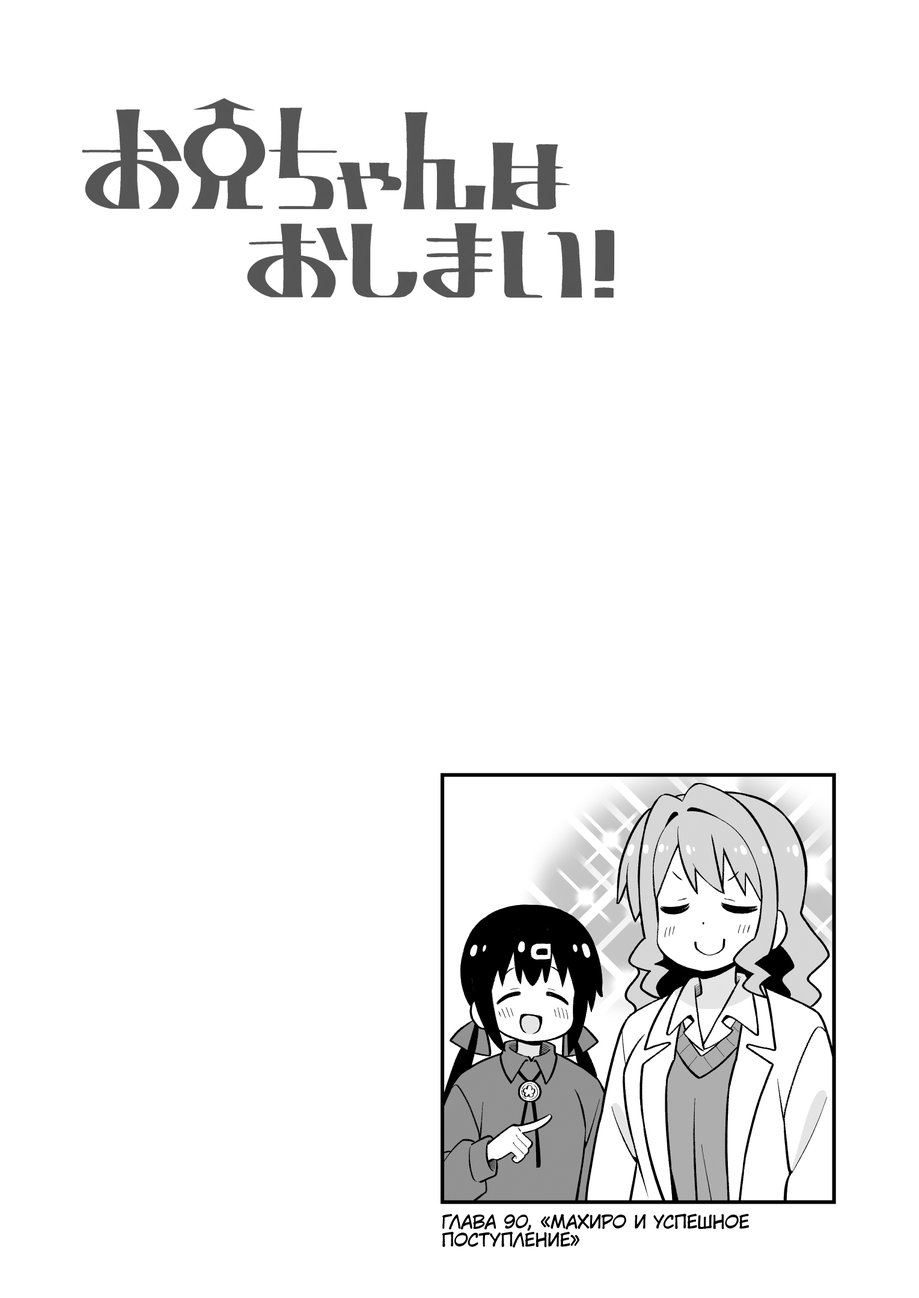
<style>
.page{position:relative;width:919px;height:1298px;background:#ffffff}
.page>*{position:absolute;margin:0}
.t1{font:18px "KuraiVoice2";color:#000000;text-transform:uppercase}
</style>
<div class="page">
<p class="t1" style="left:442px;top:1213px;width:307px;height:34px">Глава 90, «Махиро и успешное<br>поступление»</p>
</div>
